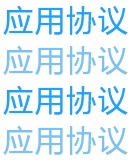
<style>
.page{position:relative;width:130px;height:160px;background:#ffffff}
.page>*{position:absolute;margin:0}
.t1{font:30px "MicrosoftYaHei";letter-spacing:0.052em;color:#20a0ff}
.t2{font:30px "MicrosoftYaHei";letter-spacing:0.052em;color:#7ac1f6}
</style>
<div class="page">
<p class="t1" style="left:3px;top:5px;width:125px;height:30px">应用协议</p>
<p class="t2" style="left:3px;top:45px;width:125px;height:30px">应用协议</p>
<p class="t1" style="left:3px;top:85px;width:125px;height:30px">应用协议</p>
<p class="t2" style="left:3px;top:125px;width:125px;height:30px">应用协议</p>
</div>
